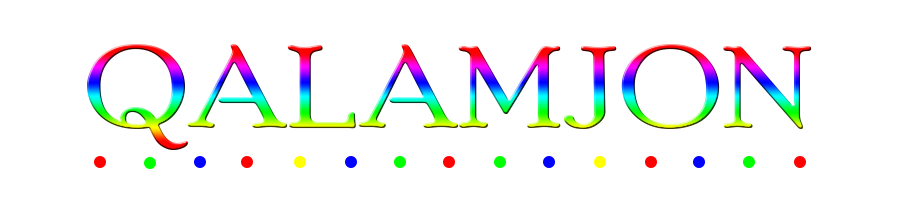
<style>
.page{position:relative;width:900px;height:204px;background:#ffffff}
.page>*{position:absolute;margin:0}
.t1{font:115.9px "PoorRichard-Regular";letter-spacing:0.02em;scale:1.15 1}
</style>
<div class="page">
<p class="t1" style="left:87px;top:44px;width:725px;height:106px">QALAMJON</p>
</div>
